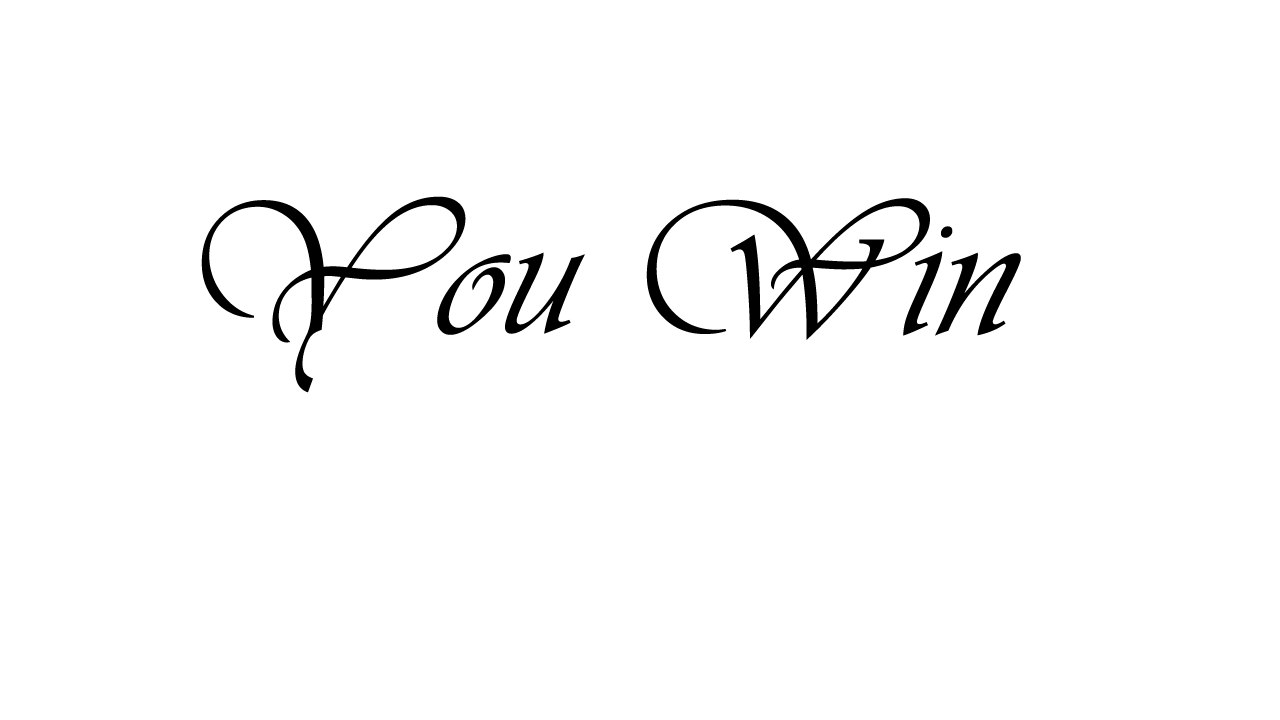
<style>
.page{position:relative;width:1280px;height:720px;background:#ffffff}
.page>*{position:absolute;margin:0}
.t1{font:200px "Vivaldii";color:#000000}
</style>
<div class="page">
<p class="t1" style="left:201px;top:196px;width:820px;height:197px">You Win</p>
</div>
